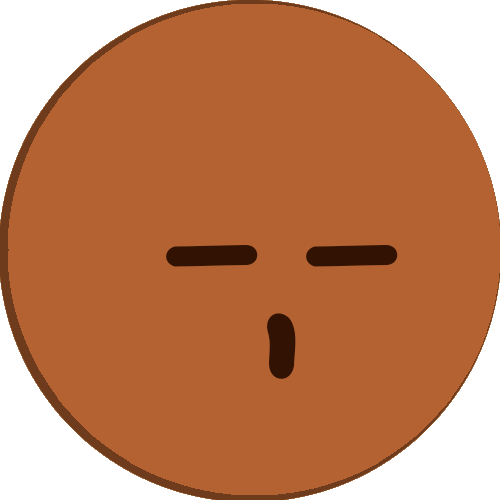
<style>
.page{position:relative;width:500px;height:500px;background:#b46231}
.page>*{position:absolute;margin:0}
.t1{font:250px "DKGrumpyTiger-Regular";color:#321303}
</style>
<div class="page">
<p class="t1" style="left:166px;top:245px;width:232px;height:134px">-,-</p>
</div>
